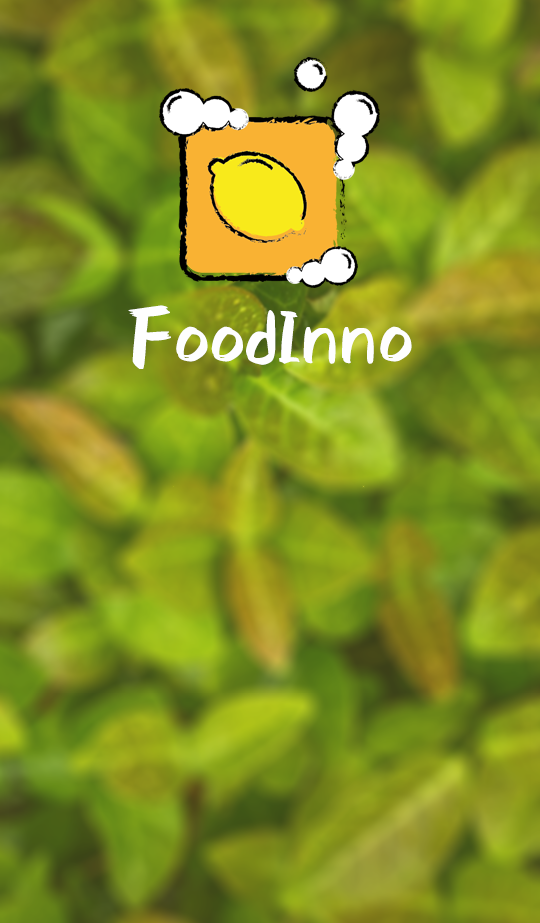
<style>
.page{position:relative;width:540px;height:923px}
.page>*{position:absolute;margin:0}
.t1{font:60px "SentyBrush";color:#fefefe}
</style>
<div class="page">
<p class="t1" style="left:128px;top:305px;width:284px;height:64px">FoodInno</p>
</div>
